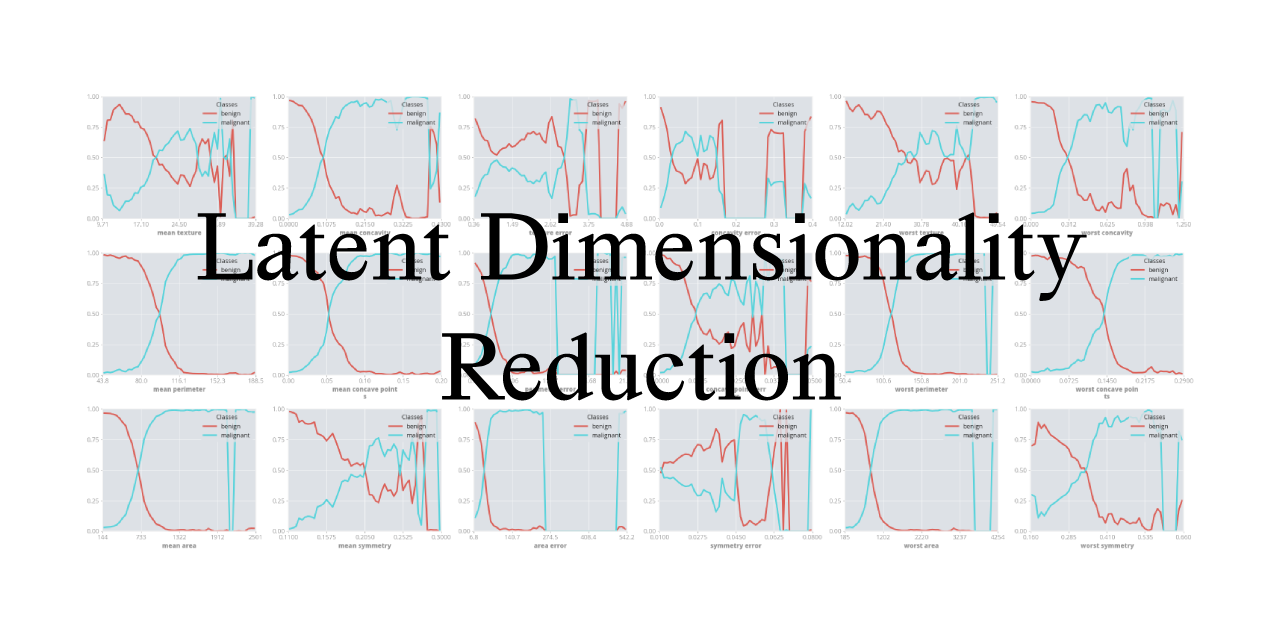
<style>
.page{position:relative;width:1280px;height:640px;background:#ffffff}
.page>*{position:absolute;margin:0}
.t1{font:100px "HappyTimesattheIKOB-Regular";color:#000000}
</style>
<div class="page">
<p class="t1" style="left:197px;top:212px;width:890px;height:189px;text-align:center">Latent Dimensionality Reduction</p>
</div>
